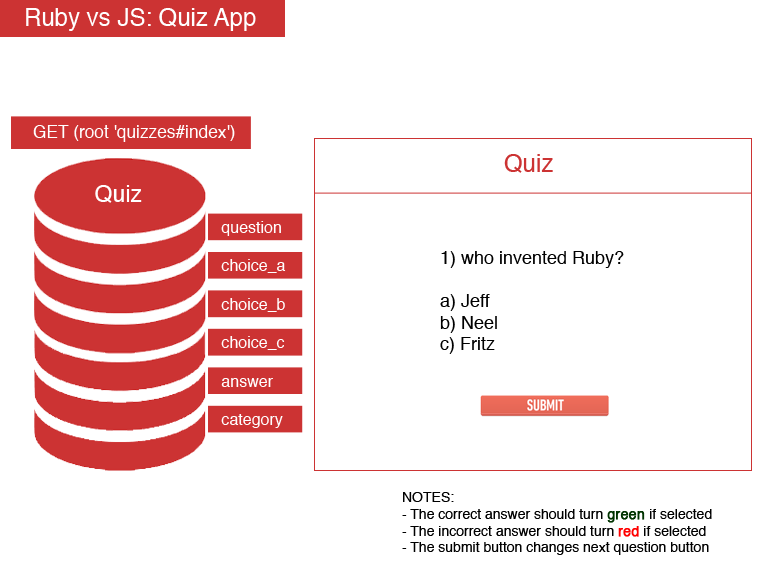
<style>
.page{position:relative;width:768px;height:576px;background:#ffffff}
.page>*{position:absolute;margin:0}
.t1{font:24px "Helvetica";color:#ffffff}
.t2{font:17.3px "Helvetica";color:#ffffff}
.t3{font:24px "Helvetica";color:#cc3333}
.t4{font:23.1px "Helvetica";color:#ffffff}
.t5{font:16px "Helvetica";color:#ffffff}
.t6{font:18px "Helvetica";color:#000000}
.t7{font:14px "Helvetica";color:#000000}
.t8{font:14px "Helvetica";color:#003300;font-weight:bold}
.t9{font:14px "Helvetica";color:#ff0000;font-weight:bold}
</style>
<div class="page">
<p class="t1" style="left:26px;top:8px;width:230px;height:23px">Ruby vs JS: Quiz App</p>
<p class="t2" style="left:33px;top:125px;width:202px;height:17px">GET (root 'quizzes#index')</p>
<p class="t3" style="left:504px;top:154px;width:49px;height:19px">Quiz</p>
<p class="t4" style="left:95px;top:185px;width:47px;height:18px">Quiz</p>
<p class="t5" style="left:221px;top:221px;width:60px;height:15px">question</p>
<p class="t6" style="left:440px;top:251px;width:184px;height:103px">1) who invented Ruby?<br><br>a) Jeff<br>b) Neel<br>c) Fritz</p>
<p class="t5" style="left:221px;top:259px;width:65px;height:14px">choice_a</p>
<p class="t5" style="left:221px;top:298px;width:64px;height:14px">choice_b</p>
<p class="t5" style="left:221px;top:336px;width:64px;height:14px">choice_c</p>
<p class="t5" style="left:221px;top:378px;width:52px;height:9px">answer</p>
<p class="t5" style="left:221px;top:414px;width:62px;height:14px">category</p>
<p class="t7" style="left:402px;top:492px;width:310px;height:63px">NOTES:<br>- The correct answer should turn <span class="t8">green </span>if selected<br>- The incorrect answer should turn <span class="t9">red</span> if selected<br>- The submit button changes next question button</p>
</div>
